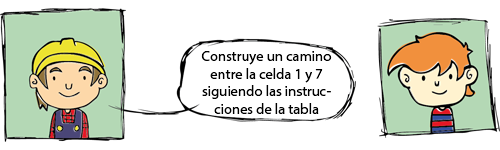
<style>
.page{position:relative;width:500px;height:150px;background:#ffffff}
.page>*{position:absolute;margin:0}
.t1{font:14.6px "MyriadHebrew-Regular";color:#000000}
</style>
<div class="page">
<p class="t1" style="left:201px;top:51px;width:131px;height:63px;text-align:center">Construye un camino entre la celda 1 y 7 siguiendo las instrucciones de la tabla</p>
</div>
